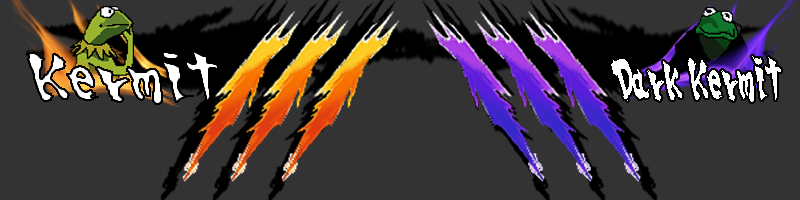
<style>
.page{position:relative;width:800px;height:200px;background:#333333}
.page>*{position:absolute;margin:0}
.t1{font:45.5px "SSF4-ABUKET-Regular";font-weight:bold}
.t2{font:38.9px "SSF4-ABUKET-Regular";color:#ffffff;scale:0.59 1}
</style>
<div class="page">
<p class="t1" style="left:26px;top:49px;width:193px;height:56px">Kermit</p>
<p class="t2" style="left:611px;top:56px;width:170px;height:46px">Dark Kermit</p>
</div>
